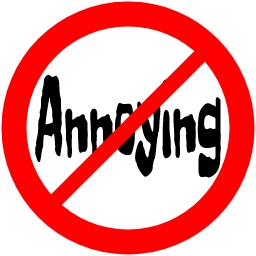
<style>
.page{position:relative;width:256px;height:256px;background:#ffffff}
.page>*{position:absolute;margin:0}
.t1{font:114px "FreckleFace-Regular";color:#000000;scale:0.43 1}
</style>
<div class="page">
<p class="t1" style="left:35px;top:74px;width:186px;height:104px">Annoying</p>
</div>
